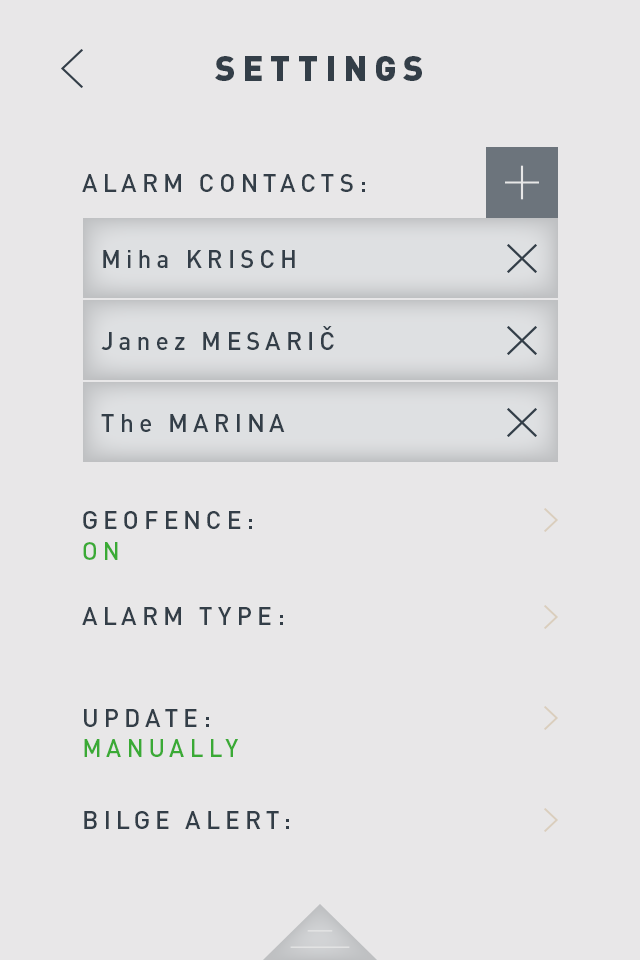
<style>
.page{position:relative;width:640px;height:960px;background:#e8e7e8}
.page>*{position:absolute;margin:0}
.t1{font:35px "DINPro-Black";letter-spacing:0.2em;color:#333e48}
.t2{font:25px "DINPro-Medium";letter-spacing:0.2em;color:#333e48}
.t3{font:25.1px/105.5px "DINPro-Medium";letter-spacing:0.2em;color:#333e48}
.t4{font:25.3px/106.3px "DINPro-Medium";letter-spacing:0.2em;color:#333e48}
.t5{font:25.2px/106px "DINPro-Medium";letter-spacing:0.2em;color:#333e48}
.t6{font:24.5px/30.4px "DINPro-Medium";letter-spacing:0.2em;color:#3aaa35}
.t7{font:25.2px "DINPro-Medium";letter-spacing:0.2em;color:#333e48}
.t8{font:24.6px/30.5px "DINPro-Medium";letter-spacing:0.2em;color:#3aaa35}
.t9{font:25.2px/105.8px "DINPro-Medium";letter-spacing:0.2em;color:#333e48}
</style>
<div class="page">
<p class="t1" style="left:215px;top:56px;width:207px;height:25px">SETTINGS</p>
<p class="t2" style="left:82px;top:174px;width:283px;height:18px">ALARM CONTACTS:</p>
<p class="t3" style="left:103px;top:250px;width:192px;height:18px">Miha KRISCH<br>ISCH</p>
<p class="t4" style="left:101px;top:326px;width:233px;height:24px">Janez MESARIČ<br>ISCH</p>
<p class="t5" style="left:101px;top:414px;width:184px;height:18px">The MARINA<br>ISCH</p>
<p class="t3" style="left:83px;top:511px;width:169px;height:49px">GEOFENCE:<br><span class="t6">ON</span></p>
<p class="t7" style="left:82px;top:607px;width:201px;height:18px">ALARM TYPE:</p>
<p class="t8" style="left:84px;top:709px;width:154px;height:48px"><span class="t9">UPDATE:<br></span>MANUALLY</p>
<p class="t7" style="left:84px;top:811px;width:205px;height:18px">BILGE ALERT:</p>
</div>
